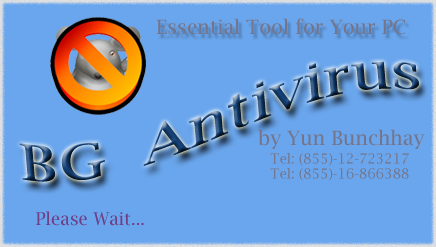
<style>
.page{position:relative;width:436px;height:247px;background:#6aa6ed}
.page>*{position:absolute;margin:0}
.t1{font:19.6px "LucidaBright";color:#74748a}
.t2{font:49.5px "LucidaBright";scale:1.29 1}
.t3{font:13.9px "LucidaBright";color:#74748a}
.t4{font:17.5px "LucidaBright";color:#6f3f86}
</style>
<div class="page">
<p class="t1" style="left:156px;top:18px;width:250px;height:17px">Essential Tool for Your PC</p>
<p class="t2" style="left:19px;top:61px;width:400px;height:121px;rotate:-12deg">BG  Antivirus</p>
<p class="t1" style="left:258px;top:129px;width:167px;height:20px">by Yun Bunchhay</p>
<p class="t3" style="left:270px;top:153px;width:139px;height:13px">Tel: (855)-12-723217</p>
<p class="t3" style="left:270px;top:168px;width:139px;height:13px">Tel: (855)-16-866388</p>
<p class="t4" style="left:36px;top:211px;width:108px;height:15px">Please Wait...</p>
</div>
